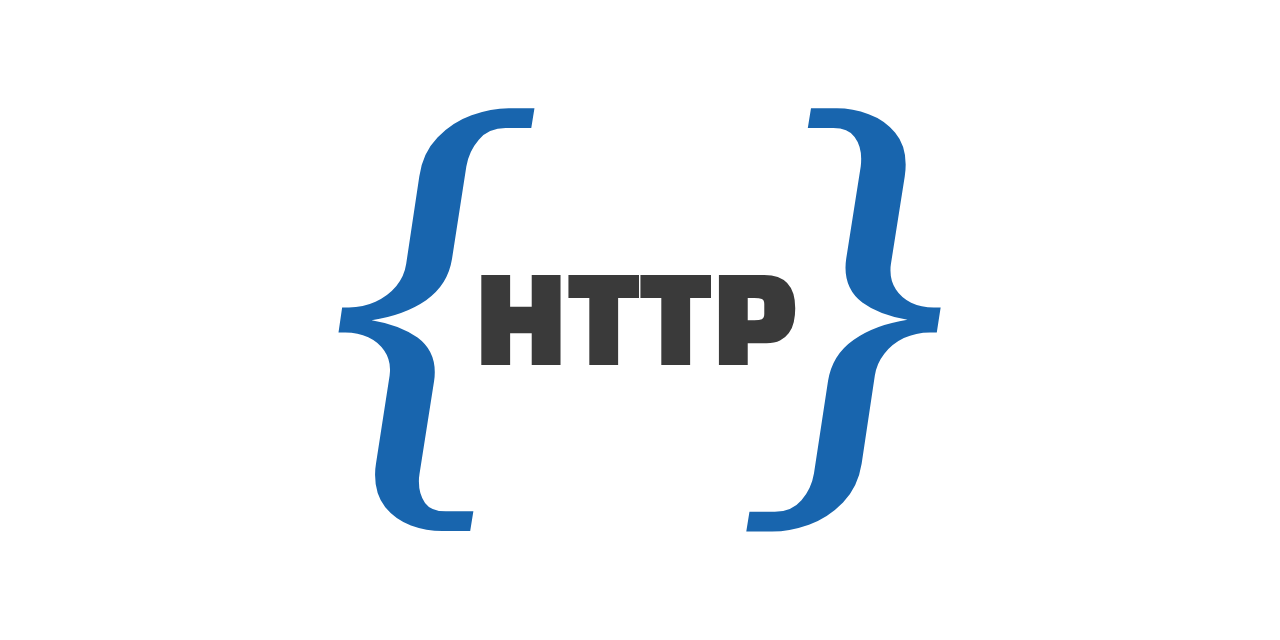
<style>
.page{position:relative;width:1280px;height:640px;background:#ffffff}
.page>*{position:absolute;margin:0}
.t1{font:465px "Gelasio-Italic";color:#1865ae}
.t2{font:120px "BlackHanSans-Regular";color:#3a3a3a}
</style>
<div class="page">
<p class="t1" style="left:338px;top:108px;width:603px;height:424px">{  }</p>
<p class="t2" style="left:481px;top:275px;width:315px;height:90px">HTTP</p>
</div>
